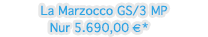
<style>
.page{position:relative;width:208px;height:37px;background:#ffffff}
.page>*{position:absolute;margin:0}
.t1{font:12px "Thonburi";color:#2ea7e5}
</style>
<div class="page">
<p class="t1" style="left:41px;top:5px;width:127px;height:11px">La Marzocco GS/3 MP</p>
<p class="t1" style="left:50px;top:22px;width:98px;height:13px">Nur 5.690,00 €*</p>
</div>
